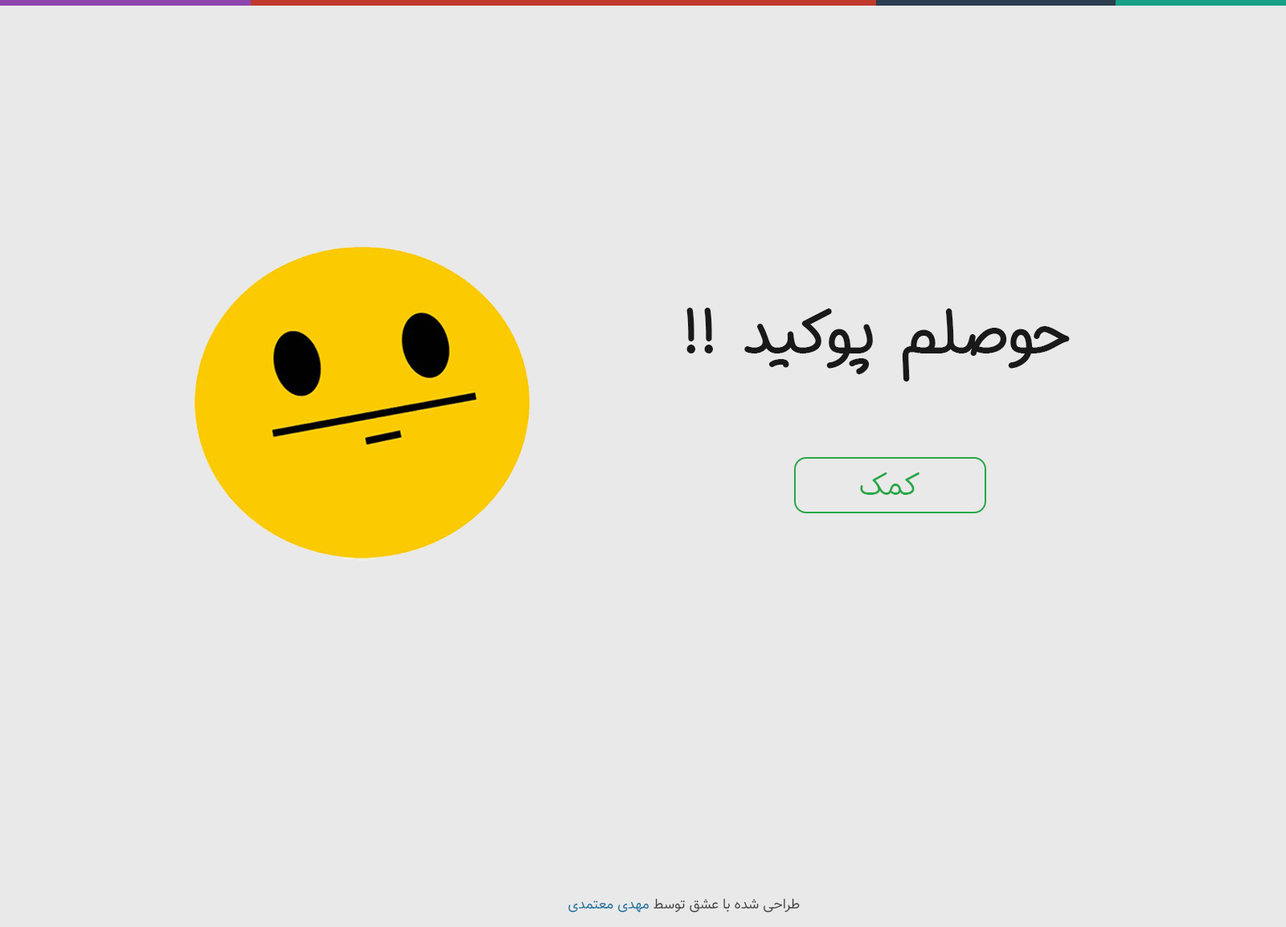
<style>
.page{position:relative;width:1286px;height:927px;background:#e9e9e9}
.page>*{position:absolute;margin:0}
.t1{font:61px "Mikhak-Bold";color:#191919}
.t2{font:30.1px "Mikhak-Medium";color:#28a745}
.t3{font:14.2px "Vazir-Light";color:#3d3d3d}
.t4{font:14.2px "Vazir-Light";color:#086c9b}
</style>
<div class="page">
<p class="t1" style="left:686px;top:308px;width:384px;height:74px">حوصلم پوکید !!</p>
<p class="t2" style="left:860px;top:473px;width:59px;height:22px">کمک</p>
<p class="t3" style="left:568px;top:898px;width:232px;height:15px">طراحی شده با عشق توسط <span class="t4">مهدی معتمدی</span></p>
</div>
